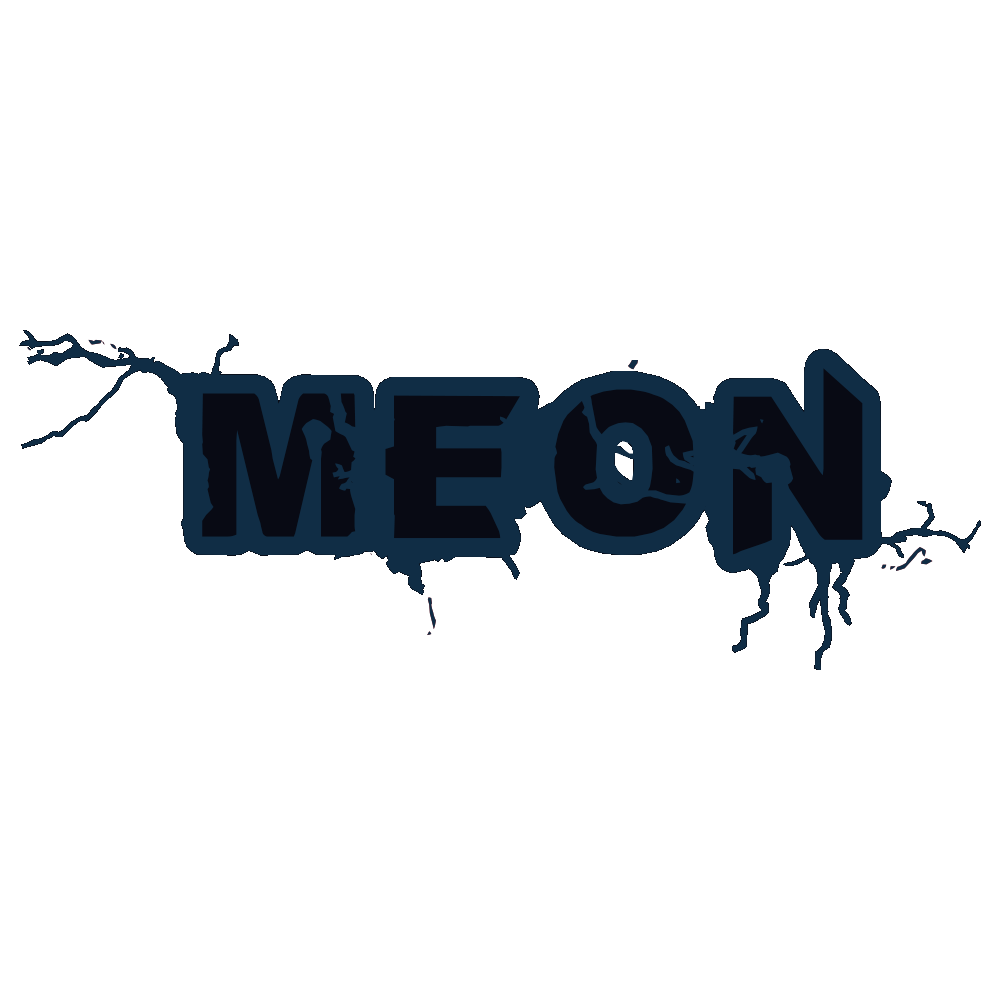
<style>
.page{position:relative;width:1000px;height:1000px;background:#ffffff}
.page>*{position:absolute;margin:0}
.t1{font:337.5px "INFECTED";color:#102d45}
</style>
<div class="page">
<p class="t1" style="left:19px;top:330px;width:962px;height:340px">meon</p>
</div>
